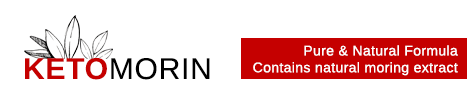
<style>
.page{position:relative;width:475px;height:105px;background:#ffffff}
.page>*{position:absolute;margin:0}
.t1{font:14px "Arimo";letter-spacing:0.025em;color:#fefefe}
.t2{font:30px "Arimo";letter-spacing:0.025em;color:#000000}
.t3{font:30px "Arimo-Bold";letter-spacing:0.025em;color:#c50000}
</style>
<div class="page">
<p class="t1" style="left:253px;top:45px;width:205px;height:31px;text-align:right">Pure &amp; Natural Formula<br>Contains natural moring extract</p>
<p class="t2" style="left:25px;top:58px;width:185px;height:22px"><span class="t3">KETO</span>MORIN</p>
</div>
